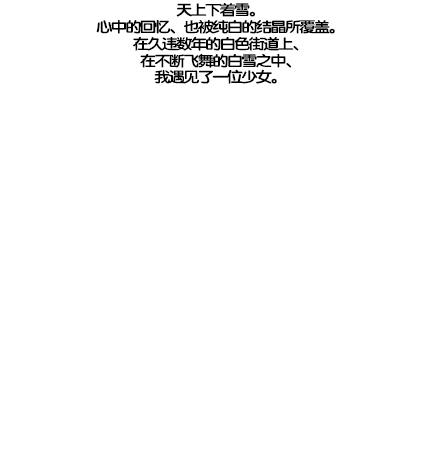
<style>
.page{position:relative;width:440px;height:476px;background:#ffffff}
.page>*{position:absolute;margin:0}
.t1{font:14.7px/16.8px "FZY4K--GBK1-0";letter-spacing:-0.13em;color:#000000;scale:1.14 1}
</style>
<div class="page">
<p class="t1" style="left:96px;top:3px;width:239px;height:81px;text-align:center">天上下着雪。<br>心中的回忆、也被纯白的结晶所覆盖。<br>在久违数年的白色街道上、<br>在不断飞舞的白雪之中、<br>我遇见了一位少女。</p>
</div>
